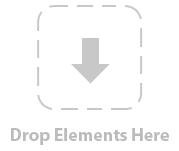
<style>
.page{position:relative;width:179px;height:151px;background:#ffffff}
.page>*{position:absolute;margin:0}
.t1{font:18px "MyriadPro-Bold";color:#bbbbbb}
</style>
<div class="page">
<p class="t1" style="left:11px;top:128px;width:158px;height:17px">Drop Elements Here</p>
</div>
